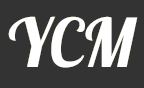
<style>
.page{position:relative;width:144px;height:88px;background:#333333}
.page>*{position:absolute;margin:0}
.t1{font:67.2px "Lobster13";color:#ffffff}
</style>
<div class="page">
<p class="t1" style="left:8px;top:16px;width:130px;height:52px">YCM</p>
</div>
